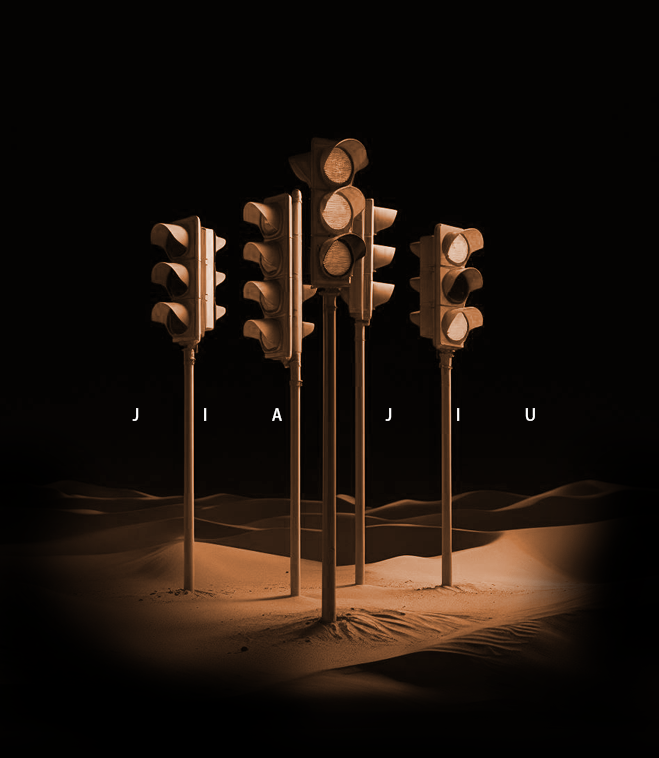
<style>
.page{position:relative;width:659px;height:758px;background:#040302}
.page>*{position:absolute;margin:0}
.t1{font:16px "AdobeHeitiStd-Regular";letter-spacing:4em;color:#ffffff}
</style>
<div class="page">
<p class="t1" style="left:132px;top:408px;width:150px;height:13px">JIA</p>
<p class="t1" style="left:385px;top:408px;width:150px;height:13px">JIU</p>
</div>
